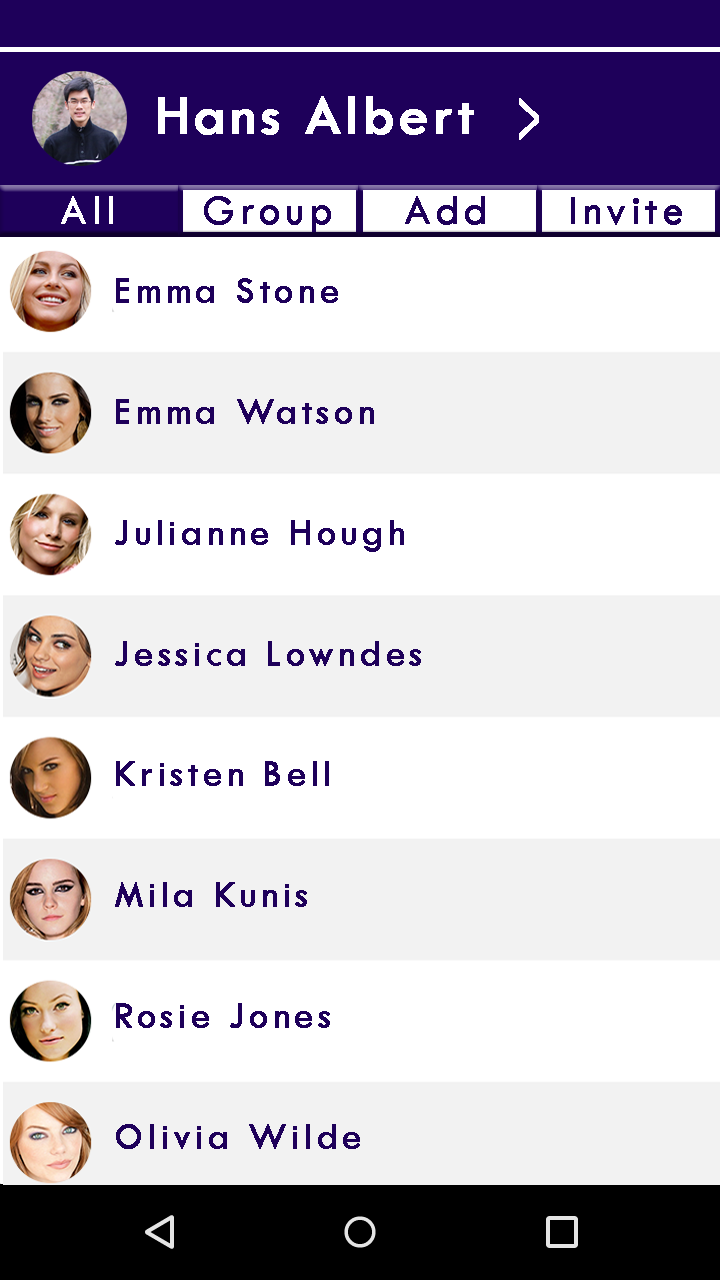
<style>
.page{position:relative;width:720px;height:1280px;background:#ffffff}
.page>*{position:absolute;margin:0}
.t1{font:58.3px "TwCenMT-Regular";letter-spacing:0.05em;color:#ffffff;font-weight:bold}
.t2{font:80.7px "TwCenMT-Regular";letter-spacing:0.05em;color:#ffffff;font-weight:bold;scale:0.43 1}
.t3{font:42.1px "TwCenMT-Regular";letter-spacing:0.1em;color:#ffffff;font-weight:bold}
.t4{font:42.1px "TwCenMT-Regular";letter-spacing:0.1em;color:#1e005a;font-weight:bold}
.t5{font:37.5px/120.8px "TwCenMT-Regular";letter-spacing:0.1em;color:#1e005a;font-weight:bold}
</style>
<div class="page">
<p class="t1" style="left:158px;top:96px;width:316px;height:39px">Hans Albert</p>
<p class="t2" style="left:519px;top:98px;width:20px;height:42px">&gt;</p>
<p class="t3" style="left:61px;top:196px;width:52px;height:28px">All</p>
<p class="t4" style="left:204px;top:196px;width:127px;height:36px">Group</p>
<p class="t4" style="left:405px;top:196px;width:80px;height:29px">Add</p>
<p class="t4" style="left:571px;top:197px;width:111px;height:28px">Invite</p>
<p class="t5" style="left:115px;top:278px;width:306px;height:871px">Emma Stone<br>Emma Watson<br>Julianne Hough<br>Jessica Lowndes<br>Kristen Bell<br>Mila Kunis<br>Rosie Jones<br>Olivia Wilde</p>
</div>
